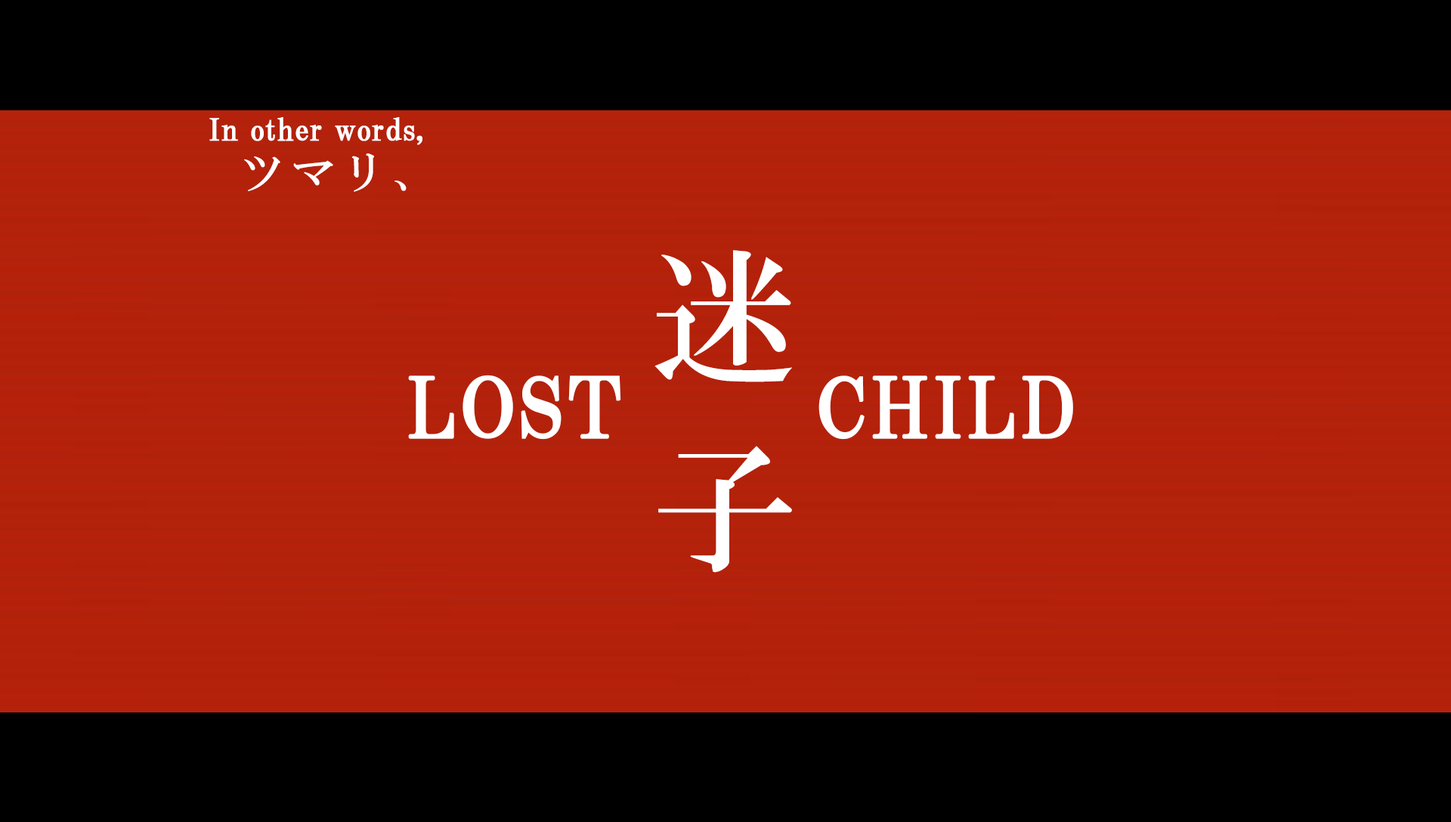
<style>
.page{position:relative;width:1451px;height:822px;background:#000000}
.page>*{position:absolute;margin:0}
.t1{font:30.2px "HGPMinchoB";letter-spacing:0.01em;color:#ffffff;font-weight:bold}
.t2{font:43.8px "HGMinchoB";letter-spacing:0.16em;color:#ffffff}
.t3{font:145.8px/191.9px "HGMinchoB";letter-spacing:0.16em;color:#ffffff}
.t4{font:82.6px "HGPMinchoB";letter-spacing:0.025em;color:#ffffff;font-weight:bold}
</style>
<div class="page">
<p class="t1" style="left:209px;top:117px;width:213px;height:28px">In other words,</p>
<p class="t2" style="left:244px;top:153px;width:162px;height:39px">ツマリ、</p>
<p class="t3" style="left:654px;top:250px;width:138px;height:323px">迷<br>子</p>
<p class="t4" style="left:408px;top:375px;width:665px;height:65px">LOST      CHILD</p>
</div>
